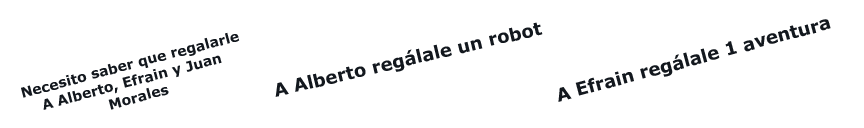
<style>
.page{position:relative;width:864px;height:128px;background:#ffffff}
.page>*{position:absolute;margin:0}
.t1{font:18px "Verdana-Bold";color:#13181e}
.t2{font:14px "Verdana-Bold";color:#13181e}
</style>
<div class="page">
<p class="t1" style="left:275px;top:22px;width:268px;height:75px;rotate:-13deg">A Alberto regálale un robot</p>
<p class="t1" style="left:558px;top:19px;width:273px;height:83px;rotate:-15deg">A Efrain regálale 1 aventura</p>
<p class="t2" style="left:21px;top:32px;width:219px;height:78px;text-align:center;rotate:-15deg">Necesito saber que regalarle<br>A Alberto, Efrain y Juan <br>Morales</p>
</div>
